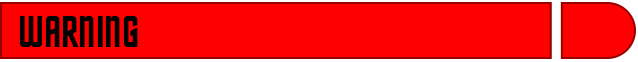
<style>
.page{position:relative;width:638px;height:62px;background:#ff0000}
.page>*{position:absolute;margin:0}
.t1{font:44px "StarTrekBT-Regular";color:#000000}
</style>
<div class="page">
<p class="t1" style="left:19px;top:16px;width:119px;height:31px">WARNING</p>
</div>
